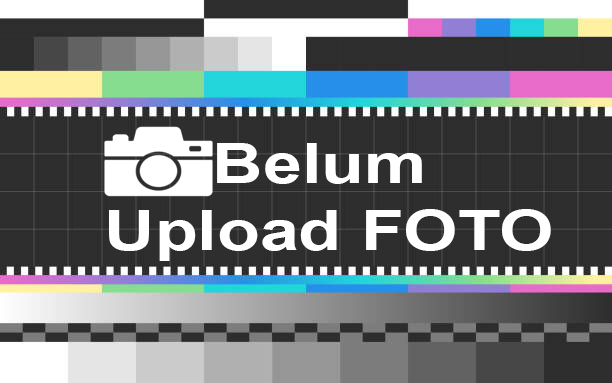
<style>
.page{position:relative;width:612px;height:383px;background:#2e2e2e}
.page>*{position:absolute;margin:0}
.t1{font:56.1px "Arial-BoldMT";color:#ffffff;scale:1.25 1}
</style>
<div class="page">
<p class="t1" style="left:109px;top:143px;width:442px;height:118px;text-align:center">Belum <br>Upload FOTO</p>
</div>
